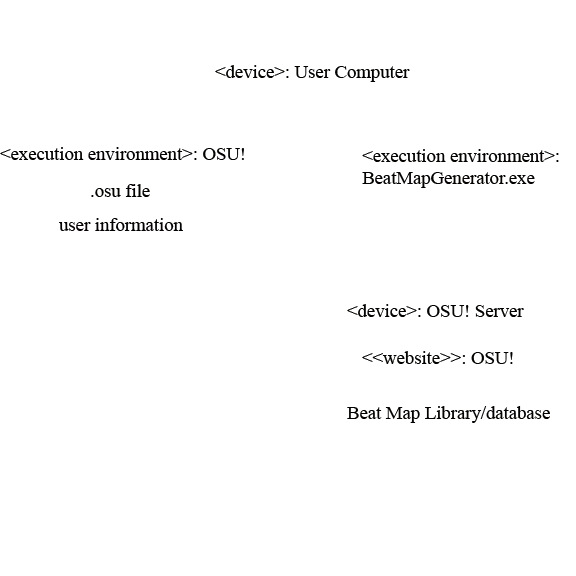
<style>
.page{position:relative;width:576px;height:576px;background:#ffffff}
.page>*{position:absolute;margin:0}
.t1{font:18.7px "TimesNewRomanPSMT";color:#030200}
</style>
<div class="page">
<p class="t1" style="left:215px;top:65px;width:195px;height:17px">&lt;device&gt;: User Computer</p>
<p class="t1" style="left:0px;top:147px;width:244px;height:13px">&lt;execution environment&gt;: OSU!</p>
<p class="t1" style="left:362px;top:149px;width:197px;height:39px">&lt;execution environment&gt;: <br>BeatMapGenerator.exe</p>
<p class="t1" style="left:91px;top:184px;width:59px;height:13px">.osu file</p>
<p class="t1" style="left:59px;top:218px;width:124px;height:13px">user information</p>
<p class="t1" style="left:347px;top:304px;width:177px;height:13px">&lt;device&gt;: OSU! Server</p>
<p class="t1" style="left:362px;top:351px;width:151px;height:13px">&lt;&lt;website&gt;&gt;: OSU!</p>
<p class="t1" style="left:347px;top:406px;width:203px;height:17px">Beat Map Library/database</p>
</div>
